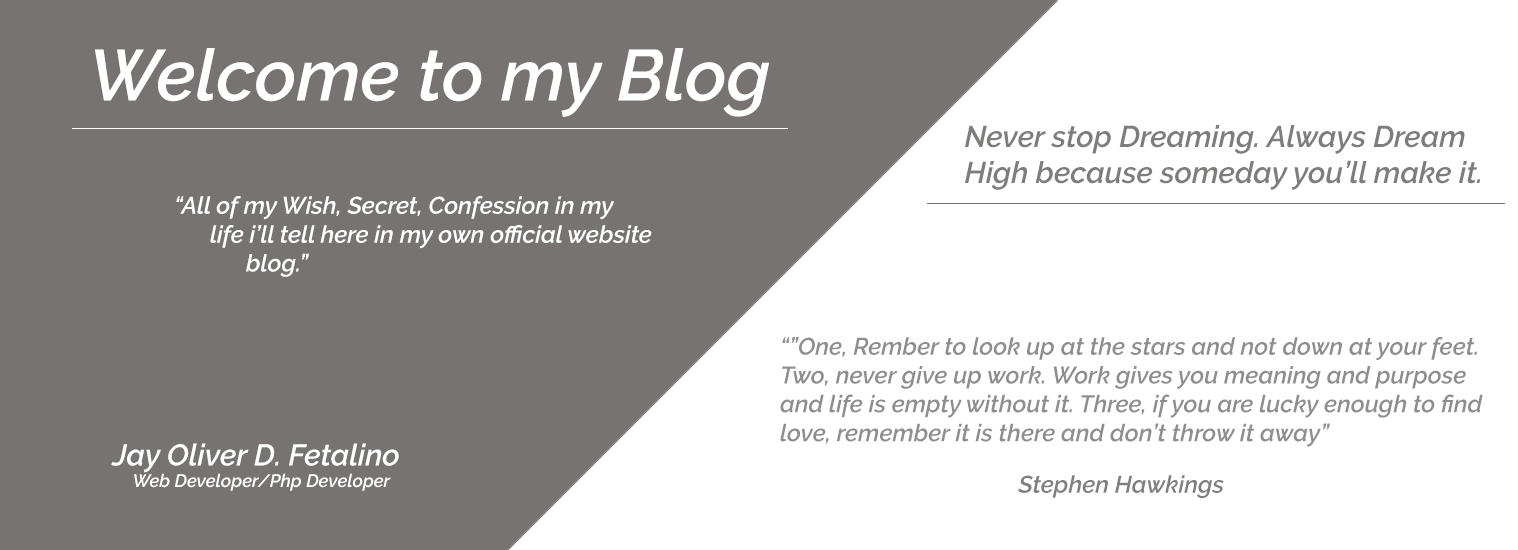
<style>
.page{position:relative;width:1518px;height:550px;background:#787373}
.page>*{position:absolute;margin:0}
.t1{font:72px "Raleway-SemiBoldItalic";color:#ffffff}
.t2{font:30px "Raleway-SemiBoldItalic";color:#7f7c7c}
.t3{font:24px "Raleway-SemiBoldItalic";color:#ffffff}
.t4{font:24px "Raleway-SemiBoldItalic";color:#8f8e8e}
.t5{font:18px "Raleway-SemiBoldItalic";color:#ffffff}
.t6{font:30px "Raleway-SemiBoldItalic";color:#ffffff}
.t7{font:24px "Raleway-SemiBoldItalic";color:#807f7f}
</style>
<div class="page">
<p class="t1" style="left:94px;top:48px;width:675px;height:69px">Welcome to my Blog</p>
<p class="t2" style="left:965px;top:125px;width:516px;height:65px">Never stop Dreaming. Always Dream High because someday you’ll make it.</p>
<p class="t3" style="left:176px;top:196px;width:476px;height:81px">“All of my Wish, Secret, Confession in my<br> life i’ll tell here in my own official website<br>  blog.”</p>
<p class="t4" style="left:780px;top:337px;width:703px;height:110px">“”One, Rember to look up at the stars and not down at your feet. Two, never give up work. Work gives you meaning and purpose and life is empty without it. Three, if you are lucky enough to find love, remember it is there and don’t throw it away”</p>
<p class="t5" style="left:111px;top:443px;width:288px;height:48px"><span class="t6"> Jay Oliver D. Fetalino<br></span>             Web Developer/Php Developer</p>
<p class="t7" style="left:1018px;top:475px;width:206px;height:23px">Stephen Hawkings</p>
</div>
